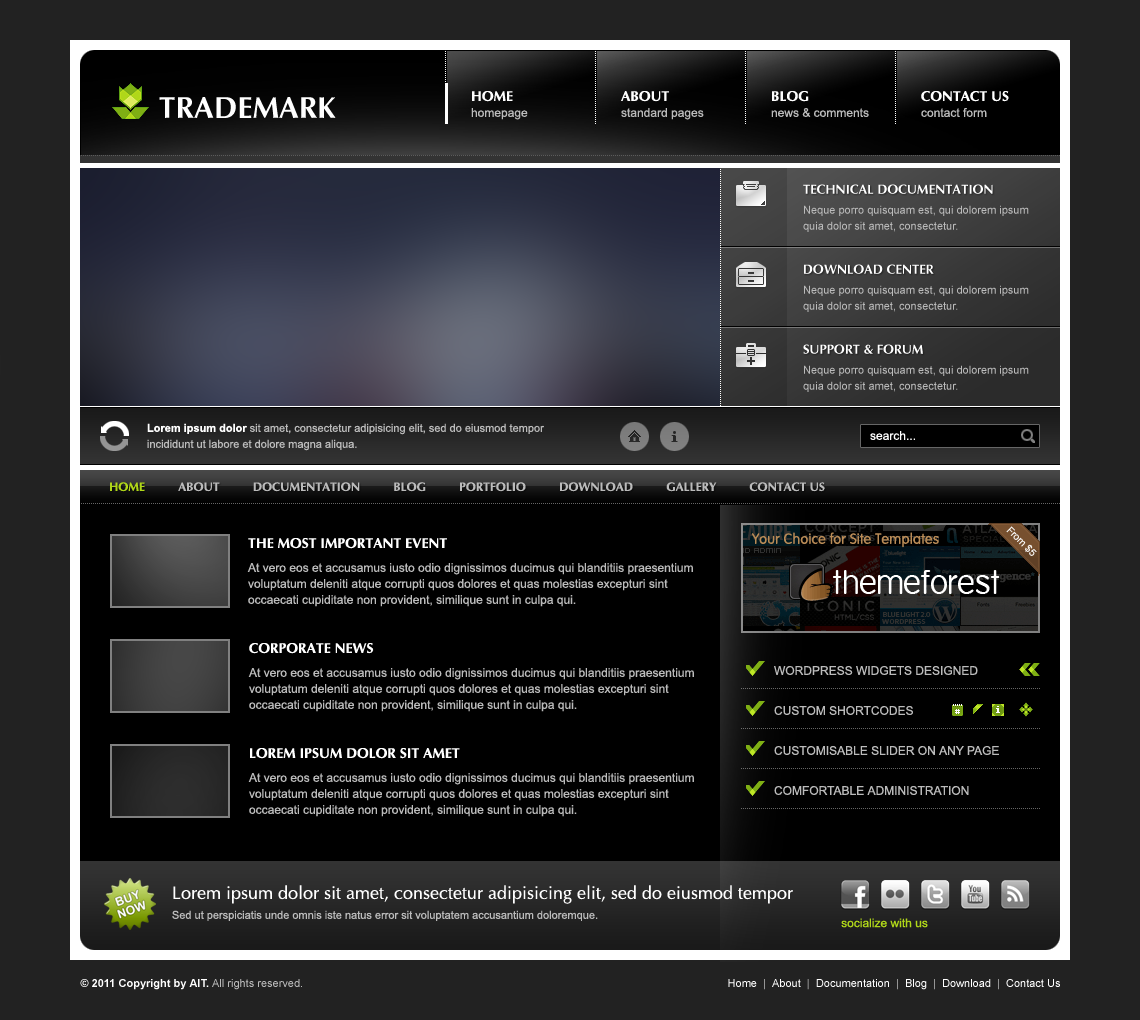
<style>
.page{position:relative;width:1140px;height:1020px;background:#000000}
.page>*{position:absolute;margin:0}
.t1{font:30px "Ottawa-Bold";color:#ffffff}
.t2{font:12px/16px "ArialMT";color:#bbbbbb}
.t3{font:14px/16px "Ottawa-Bold";color:#ffffff}
.t4{font:13px "Ottawa-Bold";color:#ffffff}
.t5{font:11px/16px "ArialMT";color:#bbbbbb}
.t6{font:11px/16px "Arial-BoldMT";color:#ffffff}
.t7{font:12px "ArialMT";color:#ffffff}
.t8{font:12px "Ottawa-Bold";color:#bbbbbb}
.t9{font:12px "Ottawa-Bold";color:#b0d719}
.t10{font:14px "Ottawa-Bold";color:#ffffff}
.t11{font:12px "ArialMT";color:#bbbbbb}
.t12{font:18px "Ottawa";color:#ffffff}
.t13{font:11px "ArialMT";color:#bbbbbb}
.t14{font:12px "ArialMT";color:#b0d719}
.t15{font:11px "Arial-BoldMT";color:#ffffff}
.t16{font:11px "ArialMT";color:#ffffff}
</style>
<div class="page">
<p class="t1" style="left:159px;top:97px;width:177px;height:21px">TRADEMARK</p>
<p class="t2" style="left:471px;top:91px;width:57px;height:29px"><span class="t3">HOME<br></span>homepage</p>
<p class="t2" style="left:621px;top:91px;width:83px;height:29px"><span class="t3">ABOUT<br></span>standard pages</p>
<p class="t2" style="left:771px;top:91px;width:98px;height:26px"><span class="t3">BLOG<br></span>news &amp; comments</p>
<p class="t2" style="left:921px;top:91px;width:88px;height:26px"><span class="t3">CONTACT US<br></span>contact form</p>
<p class="t4" style="left:803px;top:184px;width:190px;height:10px">TECHNICAL DOCUMENTATION</p>
<p class="t5" style="left:803px;top:205px;width:226px;height:27px">Neque porro quisquam est, qui dolorem ipsum <br>quia dolor sit amet, consectetur.</p>
<p class="t4" style="left:804px;top:264px;width:130px;height:10px">DOWNLOAD CENTER</p>
<p class="t5" style="left:803px;top:285px;width:226px;height:27px">Neque porro quisquam est, qui dolorem ipsum <br>quia dolor sit amet, consectetur.</p>
<p class="t4" style="left:803px;top:344px;width:120px;height:10px">SUPPORT &amp; FORUM</p>
<p class="t5" style="left:803px;top:365px;width:226px;height:27px">Neque porro quisquam est, qui dolorem ipsum <br>quia dolor sit amet, consectetur.</p>
<p class="t5" style="left:147px;top:423px;width:397px;height:28px"><span class="t6">Lorem ipsum dolor </span>sit amet, consectetur adipisicing elit, sed do eiusmod tempor <br>incididunt ut labore et dolore magna aliqua.</p>
<p class="t7" style="left:870px;top:431px;width:45px;height:9px">search...</p>
<p class="t8" style="left:110px;top:482px;width:715px;height:10px"><span class="t9">HOME          </span>ABOUT          DOCUMENTATION          BLOG          PORTFOLIO          DOWNLOAD          GALLERY          CONTACT US</p>
<p class="t10" style="left:248px;top:538px;width:199px;height:11px">THE MOST IMPORTANT EVENT</p>
<p class="t2" style="left:247px;top:563px;width:446px;height:44px">At vero eos et accusamus iusto odio dignissimos ducimus qui blanditiis praesentium <br>voluptatum deleniti atque corrupti quos dolores et quas molestias excepturi sint <br>occaecati cupiditate non provident, similique sunt in culpa qui.</p>
<p class="t10" style="left:249px;top:643px;width:125px;height:11px">CORPORATE NEWS</p>
<p class="t2" style="left:248px;top:668px;width:446px;height:44px">At vero eos et accusamus iusto odio dignissimos ducimus qui blanditiis praesentium <br>voluptatum deleniti atque corrupti quos dolores et quas molestias excepturi sint <br>occaecati cupiditate non provident, similique sunt in culpa qui.</p>
<p class="t11" style="left:774px;top:666px;width:204px;height:9px">WORDPRESS WIDGETS DESIGNED</p>
<p class="t11" style="left:774px;top:706px;width:139px;height:9px">CUSTOM SHORTCODES</p>
<p class="t10" style="left:250px;top:748px;width:210px;height:11px">LOREM IPSUM DOLOR SIT AMET</p>
<p class="t11" style="left:774px;top:746px;width:225px;height:9px">CUSTOMISABLE SLIDER ON ANY PAGE</p>
<p class="t2" style="left:248px;top:773px;width:446px;height:44px">At vero eos et accusamus iusto odio dignissimos ducimus qui blanditiis praesentium <br>voluptatum deleniti atque corrupti quos dolores et quas molestias excepturi sint <br>occaecati cupiditate non provident, similique sunt in culpa qui.</p>
<p class="t11" style="left:774px;top:786px;width:195px;height:9px">COMFORTABLE ADMINISTRATION</p>
<p class="t12" style="left:173px;top:885px;width:620px;height:19px">Lorem ipsum dolor sit amet, consectetur adipisicing elit, sed do eiusmod tempor</p>
<p class="t13" style="left:172px;top:910px;width:426px;height:11px">Sed ut perspiciatis unde omnis iste natus error sit voluptatem accusantium doloremque.</p>
<p class="t14" style="left:841px;top:918px;width:87px;height:10px">socialize with us</p>
<p class="t15" style="left:80px;top:979px;width:222px;height:11px">© 2011 Copyright by AIT. <span class="t13">All rights reserved.</span></p>
<p class="t16" style="left:728px;top:979px;width:332px;height:11px">Home  <span class="t13">|</span>  About  <span class="t13">|</span>  Documentation  <span class="t13">|</span>  Blog  <span class="t13">|</span>  Download  <span class="t13">|</span>  Contact Us</p>
</div>
